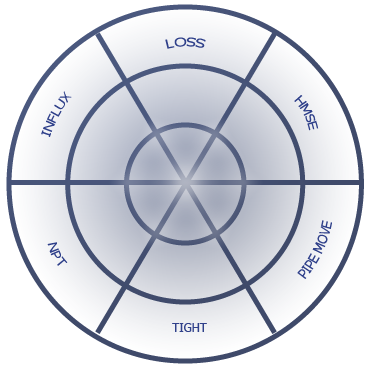
<style>
.page{position:relative;width:370px;height:367px;background:#ffffff}
.page>*{position:absolute;margin:0}
.t1{font:12px "Tahoma";color:#2f408a}
.t2{font:13.2px "Tahoma";color:#2f408a;scale:0.88 1}
</style>
<div class="page">
<p class="t1" style="left:165px;top:37px;width:41px;height:12px">LOSS</p>
<p class="t1" style="left:41px;top:91px;width:31px;height:46px;rotate:-61deg">INFLUX</p>
<p class="t1" style="left:294px;top:95px;width:25px;height:36px;rotate:63deg">HMSE</p>
<p class="t2" style="left:297px;top:220px;width:35px;height:59px;rotate:-65deg">PIPE MOVE</p>
<p class="t1" style="left:47px;top:242px;width:21px;height:24px;rotate:62deg">NPT</p>
<p class="t1" style="left:172px;top:323px;width:35px;height:9px">TIGHT</p>
</div>
